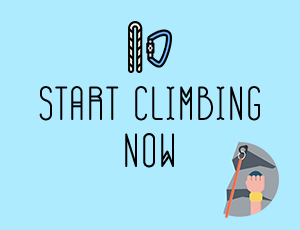
<style>
.page{position:relative;width:300px;height:230px;background:#afebff}
.page>*{position:absolute;margin:0}
.t1{font:48px "GOGOIA-Deco";color:#000000}
</style>
<div class="page">
<p class="t1" style="left:39px;top:86px;width:221px;height:35px">Start Climbing</p>
<p class="t1" style="left:125px;top:133px;width:49px;height:35px">Now</p>
</div>
